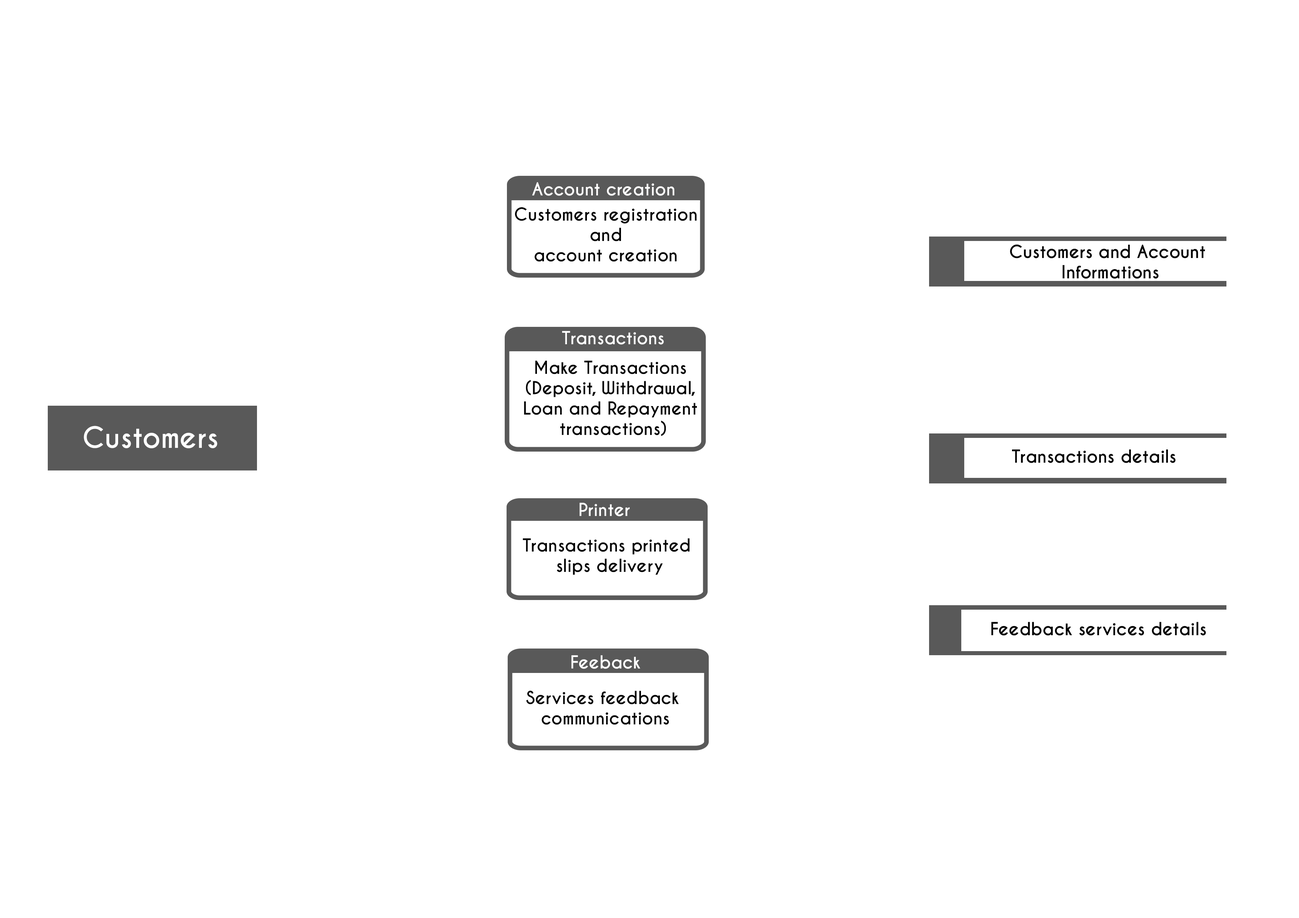
<style>
.page{position:relative;width:1299px;height:918px;background:#ffffff}
.page>*{position:absolute;margin:0}
.t1{font:17px "CaviarDreams-Bold";color:#fffefe}
.t2{font:17px "CaviarDreams-Bold";color:#000000}
.t3{font:17px "CaviarDreams-Bold";color:#ffffff}
.t4{font:27.8px "CaviarDreams-Bold";color:#ffffff}
</style>
<div class="page">
<p class="t1" style="left:532px;top:182px;width:142px;height:14px">Account creation</p>
<p class="t2" style="left:515px;top:207px;width:181px;height:55px;text-align:center">Customers registration<br> and <br>account creation</p>
<p class="t2" style="left:1010px;top:244px;width:195px;height:35px;text-align:center">Customers and Account <br>Informations</p>
<p class="t3" style="left:562px;top:331px;width:102px;height:14px">Transactions</p>
<p class="t2" style="left:524px;top:361px;width:173px;height:75px;text-align:center">Make Transactions <br>(Deposit, Withdrawal, <br>Loan and Repayment <br>transactions)</p>
<p class="t4" style="left:84px;top:426px;width:133px;height:22px">Customers</p>
<p class="t2" style="left:1012px;top:449px;width:163px;height:14px">Transactions details</p>
<p class="t3" style="left:579px;top:503px;width:51px;height:13px">Printer</p>
<p class="t2" style="left:523px;top:538px;width:166px;height:37px;text-align:center">Transactions printed <br>slips delivery</p>
<p class="t2" style="left:991px;top:622px;width:215px;height:14px">Feedback services details</p>
<p class="t3" style="left:571px;top:655px;width:69px;height:14px">Feeback</p>
<p class="t2" style="left:526px;top:690px;width:153px;height:35px;text-align:center">Services feedback <br>communications</p>
</div>
